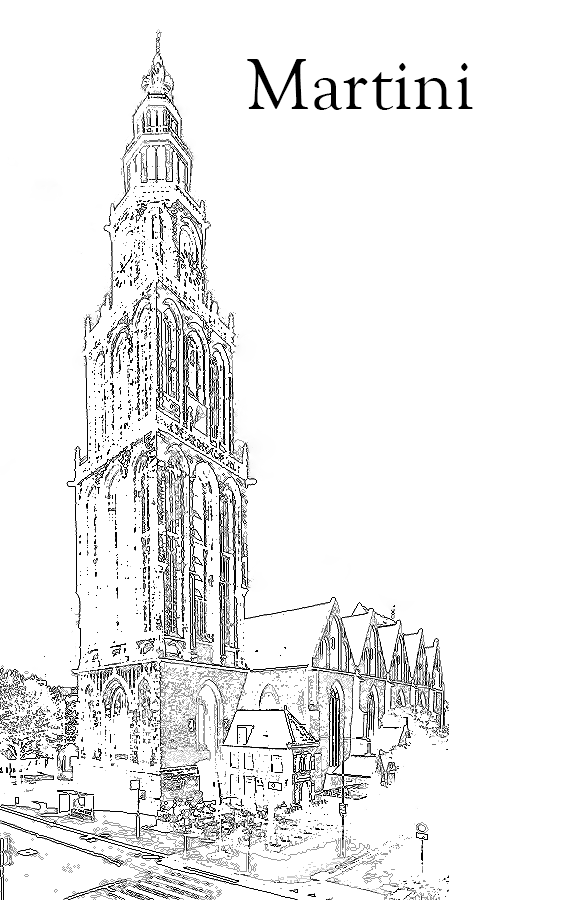
<style>
.page{position:relative;width:582px;height:900px;background:#ffffff}
.page>*{position:absolute;margin:0}
.t1{font:75px "GoudyOldStyleT-Regular";color:#000000}
</style>
<div class="page">
<p class="t1" style="left:247px;top:59px;width:226px;height:51px">Martini</p>
</div>
